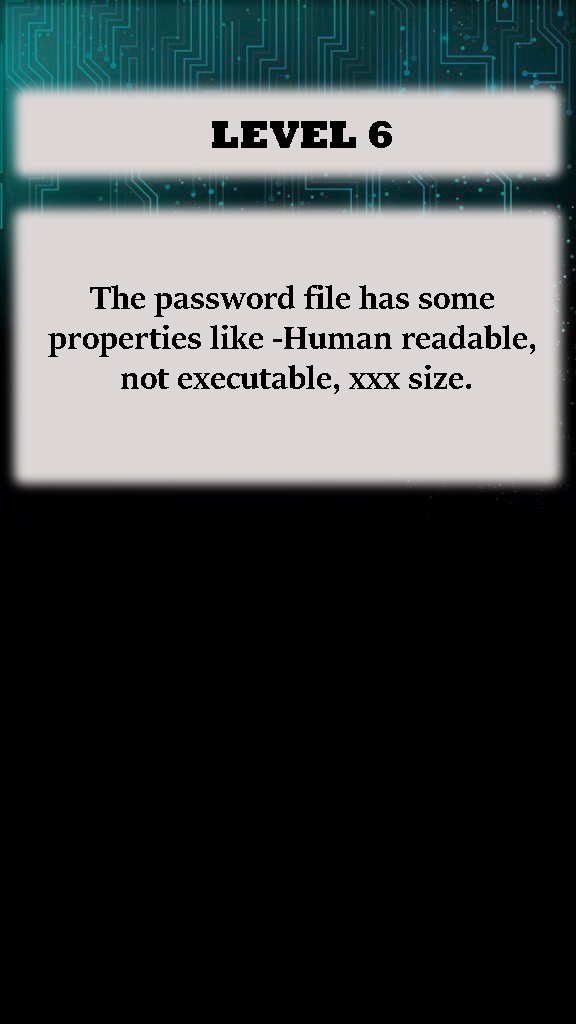
<style>
.page{position:relative;width:576px;height:1024px;background:#000000}
.page>*{position:absolute;margin:0}
.t1{font:40px "Rockwell-ExtraBold";color:#000000}
.t2{font:36px/10px "SitkaBanner-Bold";color:#000000}
</style>
<div class="page">
<p class="t1" style="left:212px;top:121px;width:180px;height:27px">LEVEL 6</p>
<p class="t2" style="left:48px;top:285px;width:487px;height:109px;text-align:center">The password file has some<br> <br><br><br>properties like -Human readable,<br><br><br><br> not executable, xxx size.</p>
</div>
